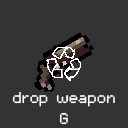
<style>
.page{position:relative;width:128px;height:128px;background:#333333}
.page>*{position:absolute;margin:0}
.t1{font:25px/20.8px "m5x7";color:#ffffff}
</style>
<div class="page">
<p class="t1" style="left:12px;top:92px;width:103px;height:33px;text-align:center">drop weapon<br>G</p>
</div>
